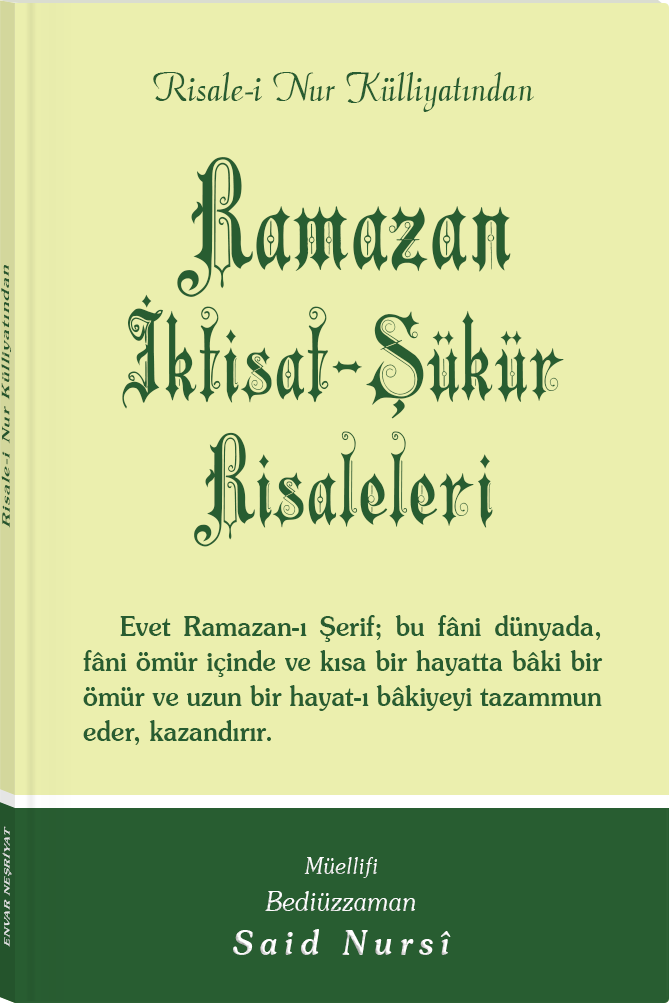
<style>
.page{position:relative;width:669px;height:1003px;background:#ebefae}
.page>*{position:absolute;margin:0}
.t1{font:45.3px "Barla © 072 Aria ScriptScriptSSi";color:#285d31;scale:0.94 1}
.t2{font:116.6px/130.4px "Barla © 001 Liva Nur";letter-spacing:-0.001em;color:#285d31;scale:0.92 1}
.t3{font:144.4px/104px "Barla © 001 Liva Nur";letter-spacing:-0.001em;color:#285d31;scale:0.92 1}
.t4{font:116.6px/124.5px "Barla © 001 Liva Nur";letter-spacing:-0.001em;color:#285d31;scale:0.92 1}
.t5{font:11.4px "Souvenir-Medium";letter-spacing:0.08em;color:#285d31;scale:1.65 1}
.t6{font:27.3px/35px "Souvenir-Medium";color:#285d31;scale:0.93 1}
.t7{font:8.3px "Souvenir-Medium";letter-spacing:0.08em;color:#e5e5e5;scale:1.43 1}
.t8{font:27.1px/37.8px "Souvenir-LightItalic";color:#ffffff;scale:0.92 1}
.t9{font:22.8px/39.8px "Souvenir-LightItalic";color:#ffffff;scale:0.92 1}
.t10{font:33.9px/43.8px "Souvenir-MediumItalic";letter-spacing:0.2em;color:#ffffff;scale:0.92 1}
</style>
<div class="page">
<p class="t1" style="left:153px;top:72px;width:381px;height:40px">Risale-i Nur Külliyatından</p>
<p class="t2" style="left:122px;top:157px;width:442px;height:390px;text-align:center"><span class="t3">Ramazan<br></span>İktisat-Şükür<br><span class="t4">Risaleleri</span></p>
<p class="t5" style="left:1px;top:265px;width:10px;height:263px;rotate:-90deg">Risale-i Nur Külliyatından</p>
<p class="t6" style="left:83px;top:615px;width:520px;height:130px;text-align:justify">Evet Ramazan-ı Şerif; bu fâni dünyada, fâni ömür içinde ve kısa bir hayatta bâki bir ömür ve uzun bir hayat-ı bâkiyeyi tazammun eder, kazandırır.</p>
<p class="t7" style="left:2px;top:826px;width:10px;height:121px;rotate:-90deg">ENVAR NEŞRİYAT</p>
<p class="t8" style="left:233px;top:857px;width:218px;height:98px;text-align:center"><span class="t9">Müellifi<br></span>Bediüzzaman<br><span class="t10">Said Nursî</span></p>
</div>
